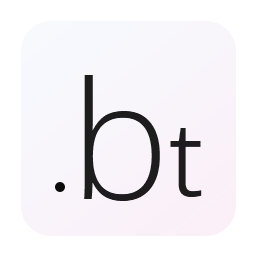
<style>
.page{position:relative;width:256px;height:256px;background:#ffffff}
.page>*{position:absolute;margin:0}
.t1{font:173.8px "DengXian-Light";color:#1d1d1e}
.t2{font:112px "DengXian";color:#1e1c1d}
</style>
<div class="page">
<p class="t1" style="left:84px;top:75px;width:76px;height:126px">b</p>
<p class="t2" style="left:170px;top:128px;width:32px;height:69px">t</p>
</div>
